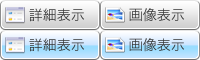
<style>
.page{position:relative;width:200px;height:60px}
.page>*{position:absolute;margin:0}
.t1{font:14px "HiraKakuPro-W3";color:#333333}
</style>
<div class="page">
<p class="t1" style="left:29px;top:8px;width:55px;height:14px">詳細表示</p>
<p class="t1" style="left:129px;top:8px;width:55px;height:14px">画像表示</p>
<p class="t1" style="left:29px;top:38px;width:55px;height:14px">詳細表示</p>
<p class="t1" style="left:129px;top:38px;width:55px;height:14px">画像表示</p>
</div>
